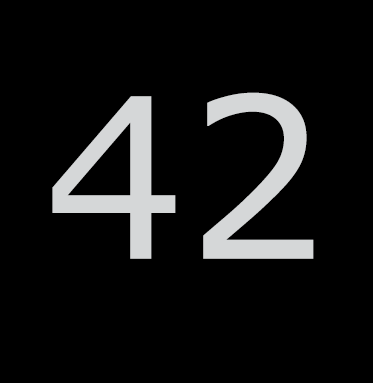
<style>
.page{position:relative;width:373px;height:383px;background:#000000}
.page>*{position:absolute;margin:0}
.t1{font:223.1px "Verdana";color:#d5d7d8}
</style>
<div class="page">
<p class="t1" style="left:52px;top:92px;width:262px;height:167px">42</p>
</div>
